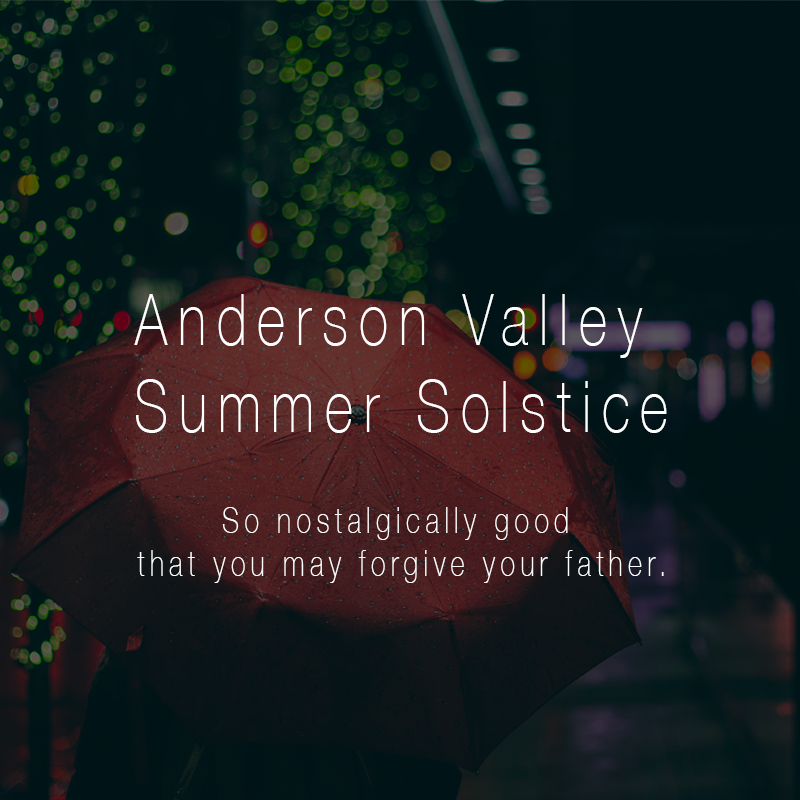
<style>
.page{position:relative;width:800px;height:800px}
.page>*{position:absolute;margin:0}
.t1{font:72px "HelveticaNeue-Thin";letter-spacing:0.2em;color:#ffffff;scale:0.75 1}
.t2{font:36px "HelveticaNeue-Thin";letter-spacing:0.2em;color:#ffffff;scale:0.75 1}
</style>
<div class="page">
<p class="t1" style="left:134px;top:294px;width:533px;height:139px;text-align:center">Anderson Valley <br>Summer Solstice</p>
<p class="t2" style="left:137px;top:507px;width:527px;height:76px;text-align:center">So nostalgically good <br>that you may forgive your father.</p>
</div>
